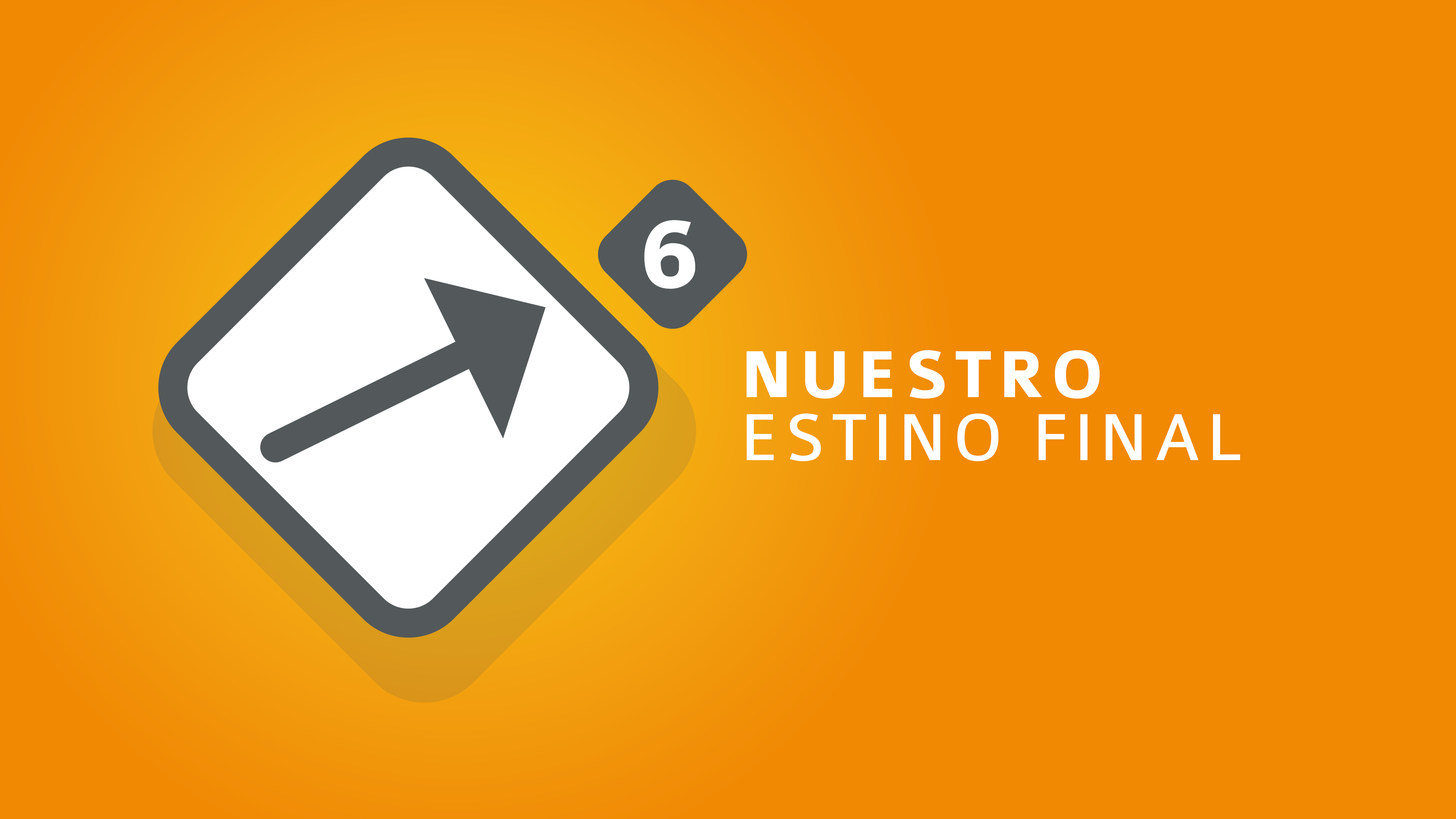
<style>
.page{position:relative;width:1456px;height:819px;background:#f18903}
.page>*{position:absolute;margin:0}
.t1{font:107.1px "Colaborate-Bold";letter-spacing:0.08em;color:#ffffff}
.t2{font:70.6px/62.9px "Colaborate-Regular";letter-spacing:0.08em;color:#ffffff}
.t3{font:70.6px/62.9px "Colaborate-Bold";letter-spacing:0.08em;color:#ffffff}
</style>
<div class="page">
<p class="t1" style="left:644px;top:220px;width:51px;height:69px">6</p>
<p class="t2" style="left:747px;top:350px;width:493px;height:112px"><span class="t3">NUESTRO<br></span>ESTINO FINAL</p>
</div>
